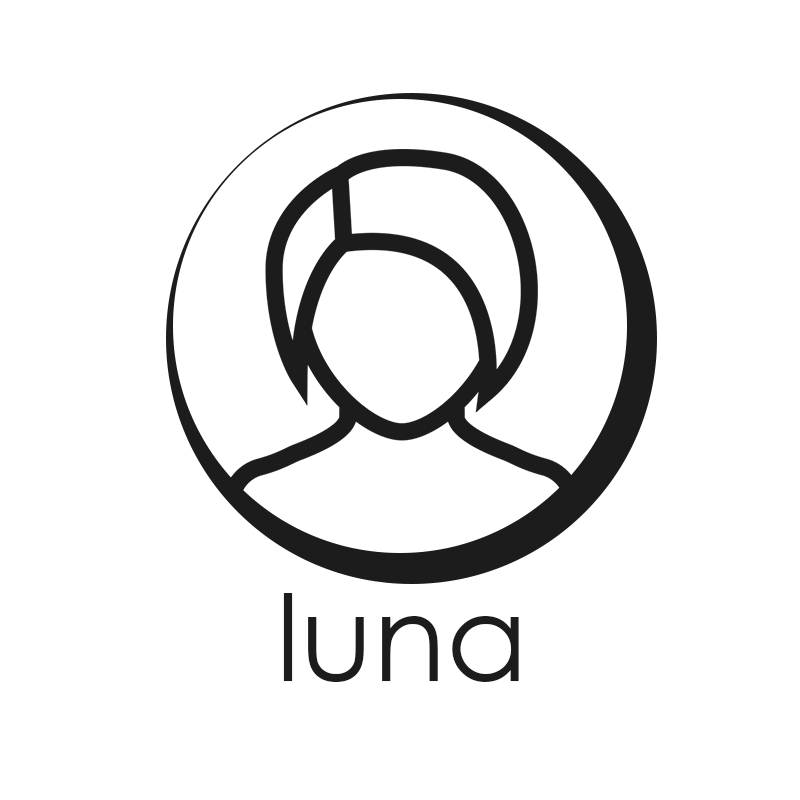
<style>
.page{position:relative;width:800px;height:800px;background:#ffffff}
.page>*{position:absolute;margin:0}
.t1{font:120px "CenturyGothic";color:#1c1c1c}
</style>
<div class="page">
<p class="t1" style="left:283px;top:593px;width:236px;height:89px">luna</p>
<p class="t1" style="left:283px;top:593px;width:236px;height:89px">luna</p>
</div>
